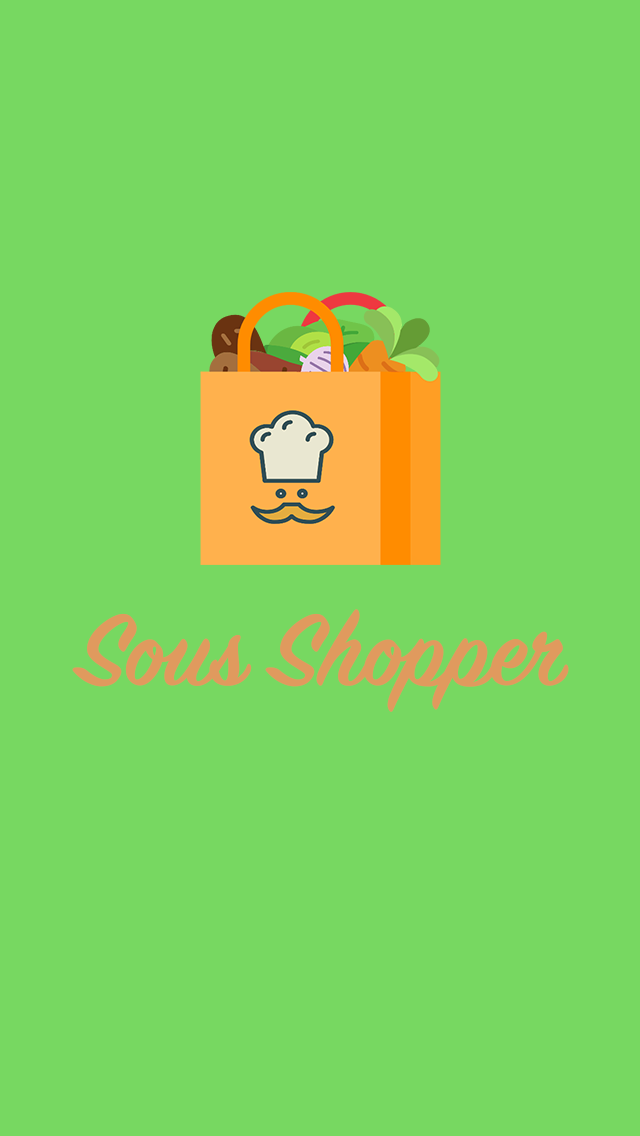
<style>
.page{position:relative;width:640px;height:1136px;background:#77d861}
.page>*{position:absolute;margin:0}
.t1{font:113px "SignPainter-HouseScriptSemibold";color:#e09a5e}
</style>
<div class="page">
<p class="t1" style="left:72px;top:609px;width:497px;height:103px">Sous Shopper</p>
</div>
